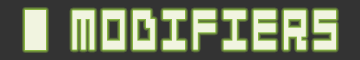
<style>
.page{position:relative;width:360px;height:60px;background:#333333}
.page>*{position:absolute;margin:0}
.t1{font:34.7px "5Computers-In-Love";color:#f1f4e0}
</style>
<div class="page">
<p class="t1" style="left:72px;top:10px;width:264px;height:40px">Modifiers</p>
</div>
